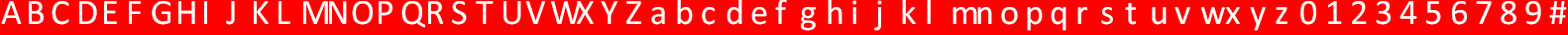
<style>
.page{position:relative;width:1568px;height:35px;background:#ff0000}
.page>*{position:absolute;margin:0}
.t1{font:35.7px "Calibri";color:#ffffff}
</style>
<div class="page">
<p class="t1" style="left:1px;top:1px;width:21px;height:23px">A</p>
<p class="t1" style="left:29px;top:1px;width:15px;height:23px">B</p>
<p class="t1" style="left:52px;top:1px;width:17px;height:24px">C</p>
<p class="t1" style="left:79px;top:1px;width:18px;height:23px">D</p>
<p class="t1" style="left:104px;top:1px;width:13px;height:23px">E</p>
<p class="t1" style="left:129px;top:1px;width:12px;height:23px">F</p>
<p class="t1" style="left:152px;top:1px;width:18px;height:24px">G</p>
<p class="t1" style="left:178px;top:1px;width:17px;height:23px">H</p>
<p class="t1" style="left:204px;top:1px;width:3px;height:23px">I</p>
<p class="t1" style="left:226px;top:1px;width:9px;height:24px">J</p>
<p class="t1" style="left:254px;top:1px;width:15px;height:23px">K</p>
<p class="t1" style="left:279px;top:1px;width:11px;height:23px">L</p>
<p class="t1" style="left:303px;top:1px;width:25px;height:23px">M</p>
<p class="t1" style="left:329px;top:1px;width:18px;height:23px">N</p>
<p class="t1" style="left:352px;top:1px;width:21px;height:24px">O</p>
<p class="t1" style="left:379px;top:1px;width:13px;height:23px">P</p>
<p class="t1" style="left:401px;top:1px;width:24px;height:27px">Q</p>
<p class="t1" style="left:428px;top:1px;width:15px;height:23px">R</p>
<p class="t1" style="left:452px;top:1px;width:15px;height:24px">S</p>
<p class="t1" style="left:476px;top:1px;width:18px;height:23px">T</p>
<p class="t1" style="left:504px;top:1px;width:17px;height:24px">U</p>
<p class="t1" style="left:525px;top:1px;width:20px;height:23px">V</p>
<p class="t1" style="left:551px;top:1px;width:30px;height:23px">W</p>
<p class="t1" style="left:577px;top:1px;width:17px;height:23px">X</p>
<p class="t1" style="left:601px;top:1px;width:16px;height:23px">Y</p>
<p class="t1" style="left:626px;top:1px;width:15px;height:23px">Z</p>
<p class="t1" style="left:677px;top:0px;width:16px;height:25px">b</p>
<p class="t1" style="left:727px;top:0px;width:15px;height:25px">d</p>
<p class="t1" style="left:775px;top:0px;width:12px;height:24px">f</p>
<p class="t1" style="left:828px;top:0px;width:14px;height:24px">h</p>
<p class="t1" style="left:852px;top:0px;width:4px;height:24px">i</p>
<p class="t1" style="left:874px;top:0px;width:8px;height:31px">j</p>
<p class="t1" style="left:902px;top:0px;width:14px;height:24px">k</p>
<p class="t1" style="left:927px;top:0px;width:4px;height:24px">l</p>
<p class="t1" style="left:1125px;top:3px;width:11px;height:22px">t</p>
<p class="t1" style="left:1300px;top:1px;width:16px;height:24px">0</p>
<p class="t1" style="left:1328px;top:1px;width:14px;height:23px">1</p>
<p class="t1" style="left:1352px;top:1px;width:15px;height:23px">2</p>
<p class="t1" style="left:1376px;top:1px;width:15px;height:24px">3</p>
<p class="t1" style="left:1400px;top:1px;width:17px;height:23px">4</p>
<p class="t1" style="left:1426px;top:1px;width:15px;height:24px">5</p>
<p class="t1" style="left:1452px;top:1px;width:15px;height:24px">6</p>
<p class="t1" style="left:1476px;top:1px;width:16px;height:23px">7</p>
<p class="t1" style="left:1501px;top:1px;width:15px;height:24px">8</p>
<p class="t1" style="left:1525px;top:1px;width:16px;height:24px">9</p>
<p class="t1" style="left:1549px;top:1px;width:18px;height:23px">#</p>
<p class="t1" style="left:651px;top:7px;width:14px;height:18px">a</p>
<p class="t1" style="left:702px;top:7px;width:13px;height:18px">c</p>
<p class="t1" style="left:751px;top:7px;width:16px;height:18px">e</p>
<p class="t1" style="left:801px;top:7px;width:15px;height:24px">g</p>
<p class="t1" style="left:952px;top:7px;width:25px;height:17px">m</p>
<p class="t1" style="left:977px;top:7px;width:15px;height:17px">n</p>
<p class="t1" style="left:1001px;top:7px;width:17px;height:18px">o</p>
<p class="t1" style="left:1027px;top:7px;width:16px;height:24px">p</p>
<p class="t1" style="left:1051px;top:7px;width:15px;height:24px">q</p>
<p class="t1" style="left:1077px;top:7px;width:10px;height:17px">r</p>
<p class="t1" style="left:1101px;top:7px;width:12px;height:18px">s</p>
<p class="t1" style="left:1152px;top:7px;width:15px;height:18px">u</p>
<p class="t1" style="left:1175px;top:7px;width:15px;height:17px">v</p>
<p class="t1" style="left:1201px;top:7px;width:24px;height:17px">w</p>
<p class="t1" style="left:1225px;top:7px;width:15px;height:17px">x</p>
<p class="t1" style="left:1250px;top:7px;width:16px;height:24px">y</p>
<p class="t1" style="left:1276px;top:7px;width:12px;height:17px">z</p>
</div>
